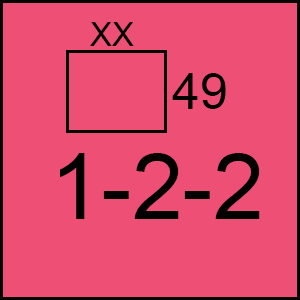
<style>
.page{position:relative;width:300px;height:300px;background:#ee4f74}
.page>*{position:absolute;margin:0}
.t1{font:33.3px "ArialMT";color:#000000}
.t2{font:50px "ArialMT";color:#000000}
.t3{font:91.7px "ArialMT";color:#000000}
</style>
<div class="page">
<p class="t1" style="left:90px;top:22px;width:44px;height:24px">XX</p>
<p class="t2" style="left:172px;top:73px;width:54px;height:36px">49</p>
<p class="t3" style="left:60px;top:153px;width:200px;height:66px">1-2-2</p>
</div>
